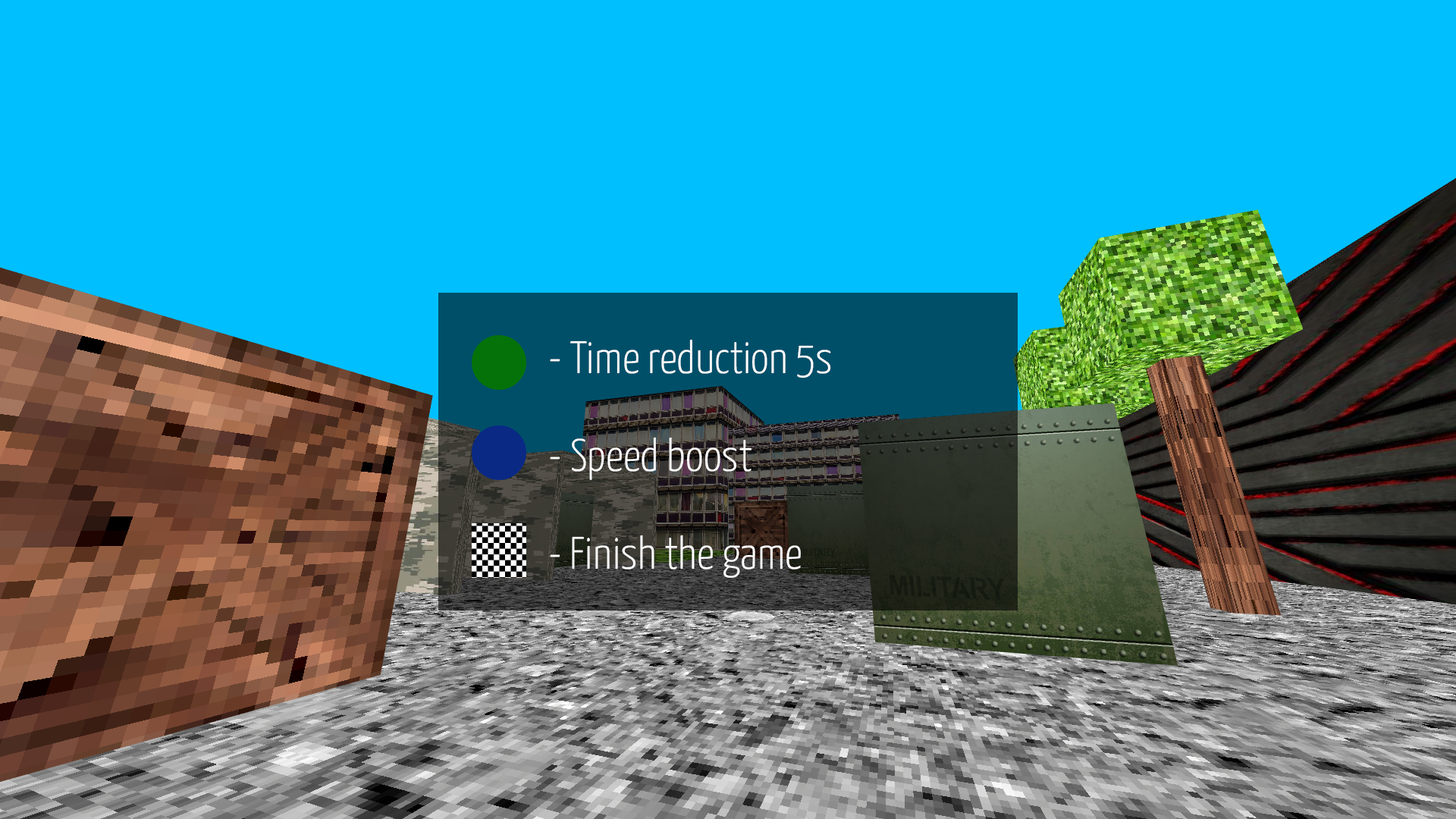
<style>
.page{position:relative;width:1456px;height:819px;background:#00bffe}
.page>*{position:absolute;margin:0}
.t1{font:45.5px "YanoneKaffeesatz-Light";color:#ffffff}
</style>
<div class="page">
<p class="t1" style="left:550px;top:339px;width:281px;height:39px">- Time reduction 5s</p>
<p class="t1" style="left:550px;top:437px;width:201px;height:43px">- Speed boost</p>
<p class="t1" style="left:550px;top:535px;width:251px;height:44px">- Finish the game</p>
</div>
